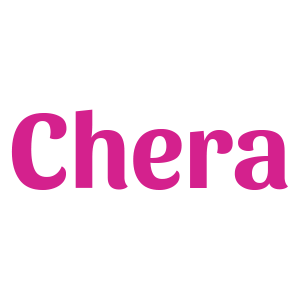
<style>
.page{position:relative;width:300px;height:300px;background:#ffffff}
.page>*{position:absolute;margin:0}
.t1{font:108.3px "Sansita-Bold";color:#d4218d}
</style>
<div class="page">
<p class="t1" style="left:11px;top:109px;width:277px;height:81px">Chera</p>
</div>
